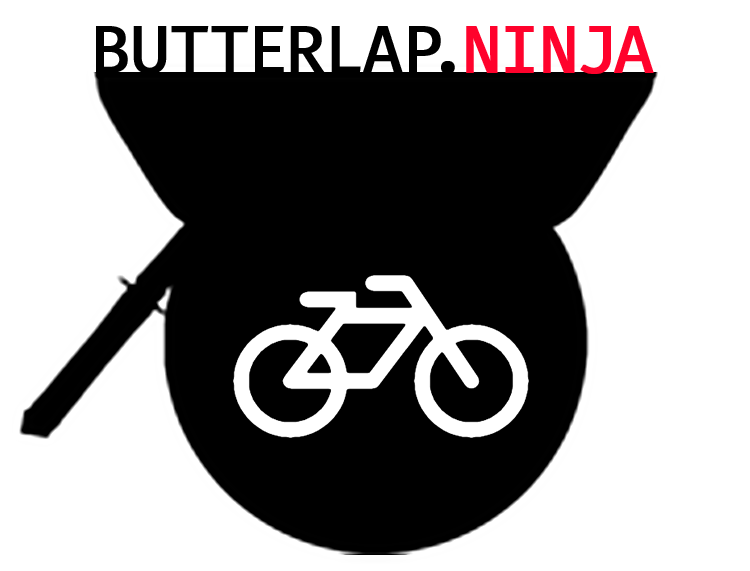
<style>
.page{position:relative;width:750px;height:571px;background:#ffffff}
.page>*{position:absolute;margin:0}
.t1{font:66.7px "FiraCode-Regular";letter-spacing:-0.025em;color:#000000;text-transform:uppercase;font-weight:bold}
.t2{font:66.7px "FiraCode-Regular";letter-spacing:-0.025em;color:#ff022c;text-transform:uppercase;font-weight:bold}
</style>
<div class="page">
<p class="t1" style="left:96px;top:26px;width:558px;height:48px">butterlap.<span class="t2">ninja</span></p>
</div>
